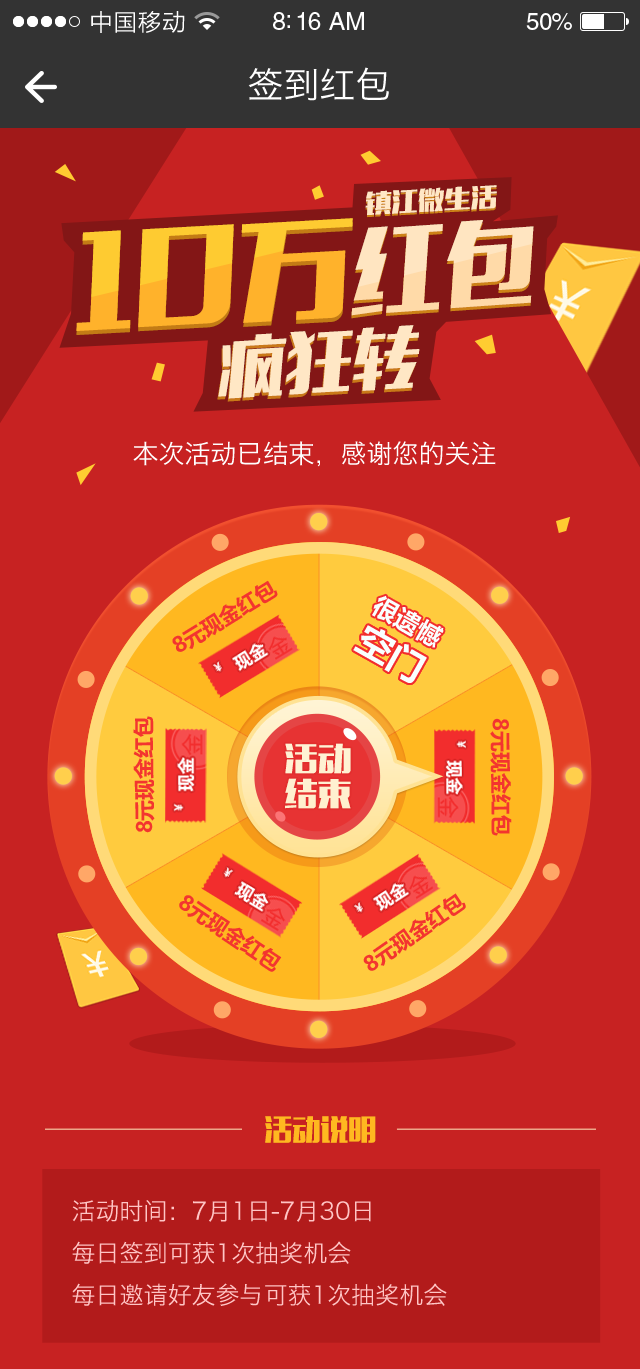
<style>
.page{position:relative;width:640px;height:1369px;background:#c72222}
.page>*{position:absolute;margin:0}
.t1{font:23px "STHeitiSC-Light";letter-spacing:-0.02em;color:#ffffff}
.t2{font:25px "HelveticaLTStd-Roman";letter-spacing:-0.02em;color:#ffffff}
.t3{font:24px "HelveticaLTStd-Roman";letter-spacing:-0.02em;color:#ffffff}
.t4{font:36px "HiraginoSansGB-W3";color:#ffffff}
.t5{font:24.6px "MFLiHei_Noncommercial-Regular";color:#ffe7c6;scale:1.08 1}
.t6{font:24.6px "MFLiHei_Noncommercial-Regular";scale:1.08 1}
.t7{font:108px "MFLiHei_Noncommercial-Regular";scale:1.08 1}
.t8{font:92.4px "MFLiHei_Noncommercial-Regular"}
.t9{font:66.7px "MFLiHei_Noncommercial-Regular";color:#ffe7c5}
.t10{font:26px "HiraginoSansGB-W3";color:#ffffff}
.t11{font:21px "MicrosoftYaHeiUI-Bold";color:#f3352f}
.t12{font:24.7px "MicrosoftYaHeiUI-Bold";color:#f9ffff}
.t13{font:35.3px "MicrosoftYaHeiUI-Bold";color:#f8ffff}
.t14{font:31.2px/35px "MFLiHei_Noncommercial-Regular";color:#fff0d1;scale:1.08 1}
.t15{font:28px "MFLiHei_Noncommercial-Regular";color:#ffb820}
.t16{font:24px "HiraginoSansGB-W3";color:#ffc5c5}
</style>
<div class="page">
<p class="t1" style="left:91px;top:11px;width:94px;height:22px">中国移动</p>
<p class="t2" style="left:273px;top:12px;width:91px;height:18px">8:16 AM</p>
<p class="t3" style="left:526px;top:13px;width:46px;height:17px">50%</p>
<p class="t4" style="left:248px;top:67px;width:141px;height:34px">签到红包</p>
<p class="t5" style="left:365px;top:185px;width:132px;height:31px;rotate:-3deg">镇江微生活</p>
<p class="t6" style="left:365px;top:187px;width:132px;height:31px;rotate:-3deg">镇江微生活</p>
<p class="t7" style="left:76px;top:222px;width:277px;height:113px;rotate:-3deg">10万</p>
<p class="t7" style="left:76px;top:218px;width:277px;height:113px;rotate:-3deg">10万</p>
<p class="t8" style="left:351px;top:220px;width:183px;height:96px;rotate:-4deg">红包</p>
<p class="t8" style="left:351px;top:223px;width:183px;height:96px;rotate:-4deg">红包</p>
<p class="t9" style="left:217px;top:328px;width:202px;height:74px;rotate:-3deg">疯狂转</p>
<p class="t9" style="left:218px;top:325px;width:202px;height:74px;rotate:-3deg">疯狂转</p>
<p class="t10" style="left:133px;top:441px;width:363px;height:26px">本次活动已结束，感谢您的关注</p>
<p class="t11" style="left:172px;top:580px;width:106px;height:72px;rotate:-32deg">8元现金红包</p>
<p class="t12" style="left:372px;top:595px;width:72px;height:53px;rotate:29deg">很遗憾</p>
<p class="t13" style="left:353px;top:625px;width:74px;height:58px;rotate:29deg">空门</p>
<p class="t13" style="left:353px;top:625px;width:74px;height:58px;rotate:29deg">空门</p>
<p class="t11" style="left:133px;top:716px;width:22px;height:117px;rotate:-91deg">8元现金红包</p>
<p class="t11" style="left:490px;top:718px;width:22px;height:118px;rotate:90deg">8元现金红包</p>
<p class="t14" style="left:285px;top:743px;width:66px;height:66px">活动<br>结束</p>
<p class="t11" style="left:363px;top:893px;width:103px;height:78px;rotate:-35deg">8元现金红包</p>
<p class="t11" style="left:179px;top:895px;width:103px;height:77px;rotate:34deg">8元现金红包</p>
<p class="t15" style="left:265px;top:1116px;width:111px;height:27px">活动说明</p>
<p class="t16" style="left:72px;top:1200px;width:375px;height:106px">活动时间：7月1日-7月30日<br>每日签到可获1次抽奖机会<br>每日邀请好友参与可获1次抽奖机会</p>
</div>
